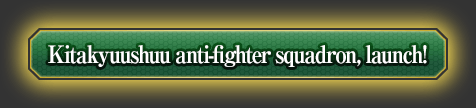
<style>
.page{position:relative;width:476px;height:108px}
.page>*{position:absolute;margin:0}
.t1{font:24px "RyuminPro-ExBold";letter-spacing:-0.08em;color:#ffffff;scale:0.9 1}
</style>
<div class="page">
<p class="t1" style="left:48px;top:45px;width:379px;height:22px">Kitakyuushuu anti-fighter squadron, launch!</p>
</div>
